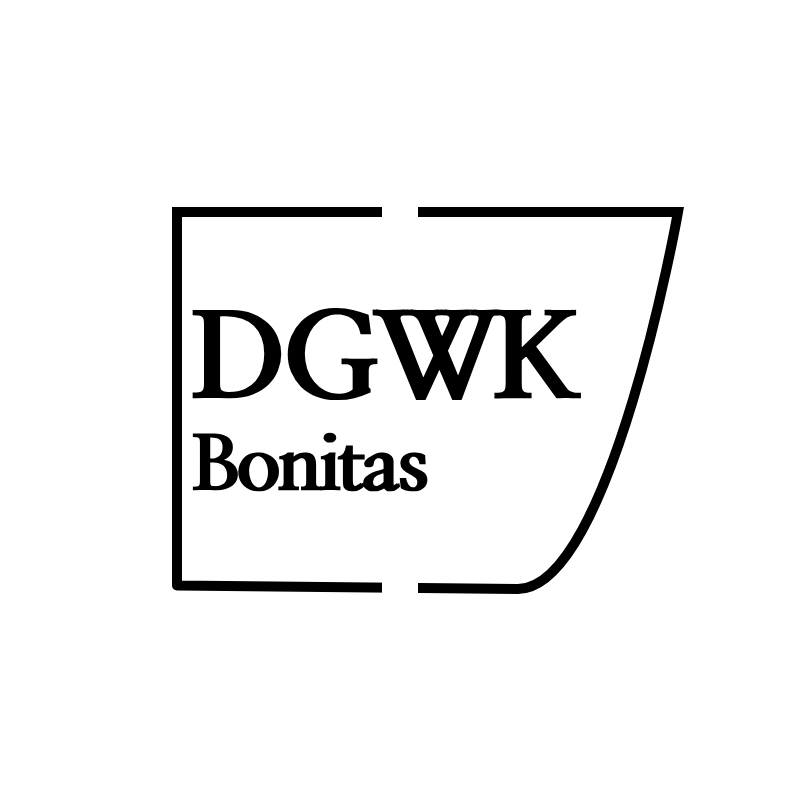
<style>
.page{position:relative;width:800px;height:800px;background:#ffffff}
.page>*{position:absolute;margin:0}
.t1{font:77px "NanumMyeongjoExtraBold";letter-spacing:-0.052em;color:#000000;font-weight:bold}
.t2{font:120px "NanumMyeongjoExtraBold";letter-spacing:-0.052em;color:#000000;font-weight:bold}
</style>
<div class="page">
<p class="t1" style="left:192px;top:308px;width:389px;height:184px"><span class="t2">DGWK<br></span>Bonitas</p>
</div>
